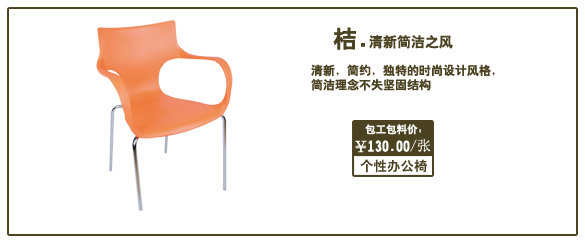
<style>
.page{position:relative;width:585px;height:240px;background:#ffffff}
.page>*{position:absolute;margin:0}
.t1{font:14px "HeitiCSEG";color:#4b4221}
.t2{font:24px "HeitiCSEG";color:#4b4221}
.t3{font:12px "HeitiCSEG";color:#4b4221}
.t4{font:10.5px "HeitiCSEG";color:#fffefe}
.t5{font:14px "HeitiCSEG";color:#ffffff}
.t6{font:14px "SimSun";color:#ffffff}
.t7{font:13.5px "HeitiCSEG";color:#4b4221}
</style>
<div class="page">
<p class="t1" style="left:333px;top:27px;width:120px;height:23px"><span class="t2">桔.</span>清新简洁之风</p>
<p class="t3" style="left:311px;top:64px;width:184px;height:27px">清新，简约，独特的时尚设计风格，<br>简洁理念不失坚固结构</p>
<p class="t4" style="left:365px;top:124px;width:56px;height:11px">包工包料价：</p>
<p class="t5" style="left:355px;top:139px;width:76px;height:14px">￥130.00<span class="t6">/张</span></p>
<p class="t7" style="left:360px;top:159px;width:67px;height:14px">个性办公椅</p>
</div>
